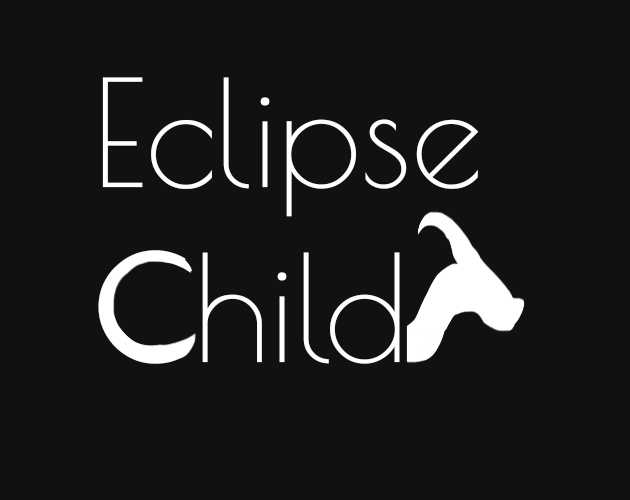
<style>
.page{position:relative;width:630px;height:500px;background:#111111}
.page>*{position:absolute;margin:0}
.t1{font:145.8px "PoiretOne-Regular";color:#ffffff}
</style>
<div class="page">
<p class="t1" style="left:98px;top:77px;width:381px;height:287px">Eclipse<br>Child</p>
</div>
